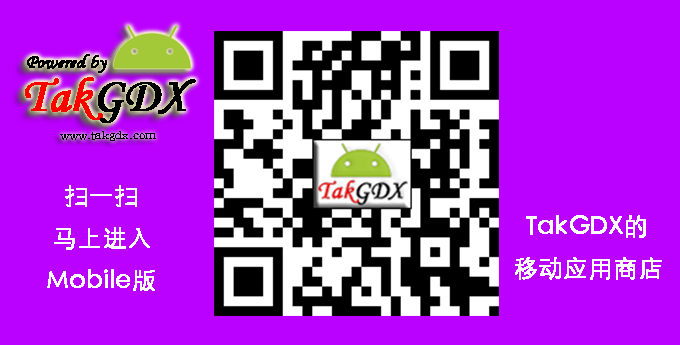
<style>
.page{position:relative;width:680px;height:345px;background:#ba00ff}
.page>*{position:absolute;margin:0}
.t1{font:24px "STXihei";color:#ffffff;font-weight:bold}
</style>
<div class="page">
<p class="t1" style="left:47px;top:185px;width:108px;height:106px;text-align:center">扫一扫<br>马上进入<br>Mobile版</p>
<p class="t1" style="left:515px;top:215px;width:147px;height:65px;text-align:center">TakGDX的<br>移动应用商店</p>
</div>
